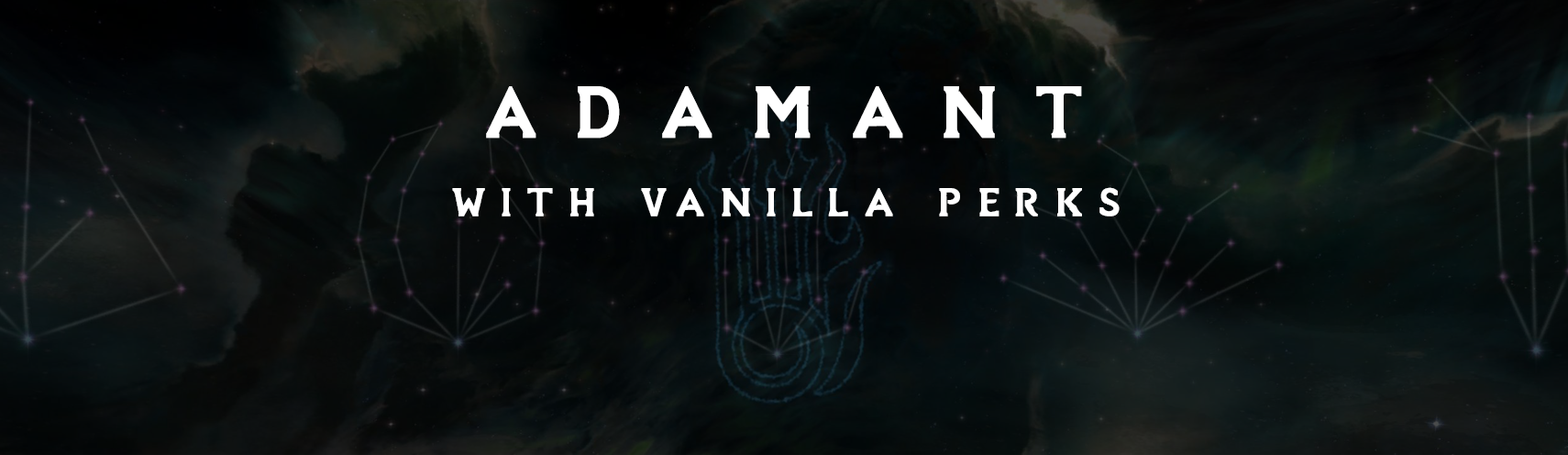
<style>
.page{position:relative;width:1568px;height:455px}
.page>*{position:absolute;margin:0}
.t1{font:91.7px "SovngardeLight";letter-spacing:0.4em;color:#ffffff;font-weight:bold}
.t2{font:50.4px "SovngardeLight";letter-spacing:0.3em;color:#ffffff;font-weight:bold}
</style>
<div class="page">
<p class="t1" style="left:486px;top:86px;width:596px;height:52px">ADAMANT</p>
<p class="t2" style="left:452px;top:187px;width:668px;height:29px">WITH VANILLA PERKS</p>
</div>
